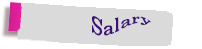
<style>
.page{position:relative;width:202px;height:49px;background:#dadada}
.page>*{position:absolute;margin:0}
.t1{font:18px "CenturySchoolbook-Bold";color:#3d107b}
</style>
<div class="page">
<p class="t1" style="left:92px;top:16px;width:59px;height:20px">Salary</p>
</div>
